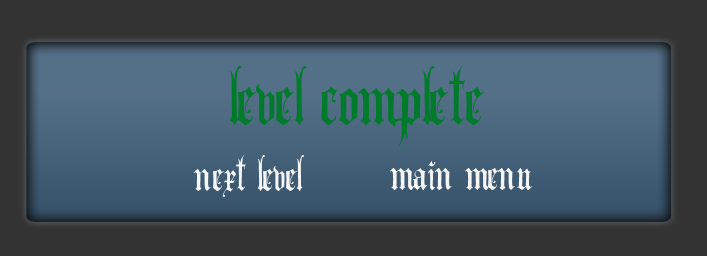
<style>
.page{position:relative;width:707px;height:256px;background:#333333}
.page>*{position:absolute;margin:0}
.t1{font:100px "AngloText";color:#007b2b}
.t2{font:60px "AngloText";color:#f6f6f6}
</style>
<div class="page">
<p class="t1" style="left:230px;top:66px;width:254px;height:80px">level complete</p>
<p class="t2" style="left:193px;top:155px;width:111px;height:42px">next level</p>
<p class="t2" style="left:390px;top:161px;width:143px;height:29px">main menu</p>
</div>
